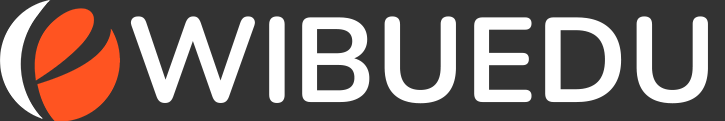
<style>
.page{position:relative;width:725px;height:121px;background:#333333}
.page>*{position:absolute;margin:0}
.t1{font:120px "Nunito-Bold";color:#ffffff}
</style>
<div class="page">
<p class="t1" style="left:130px;top:16px;width:578px;height:88px">WIBUEDU</p>
</div>
